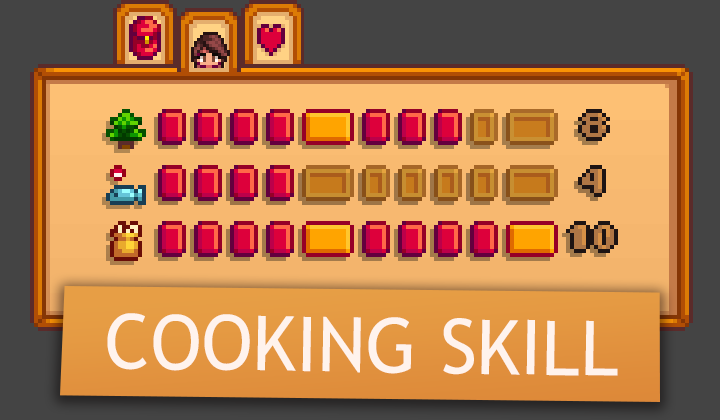
<style>
.page{position:relative;width:720px;height:420px}
.page>*{position:absolute;margin:0}
.t1{font:76px "TrebuchetMS";color:#fff3ed}
</style>
<div class="page">
<p class="t1" style="left:107px;top:313px;width:511px;height:63px;rotate:1deg">COOKING SKILL</p>
</div>
